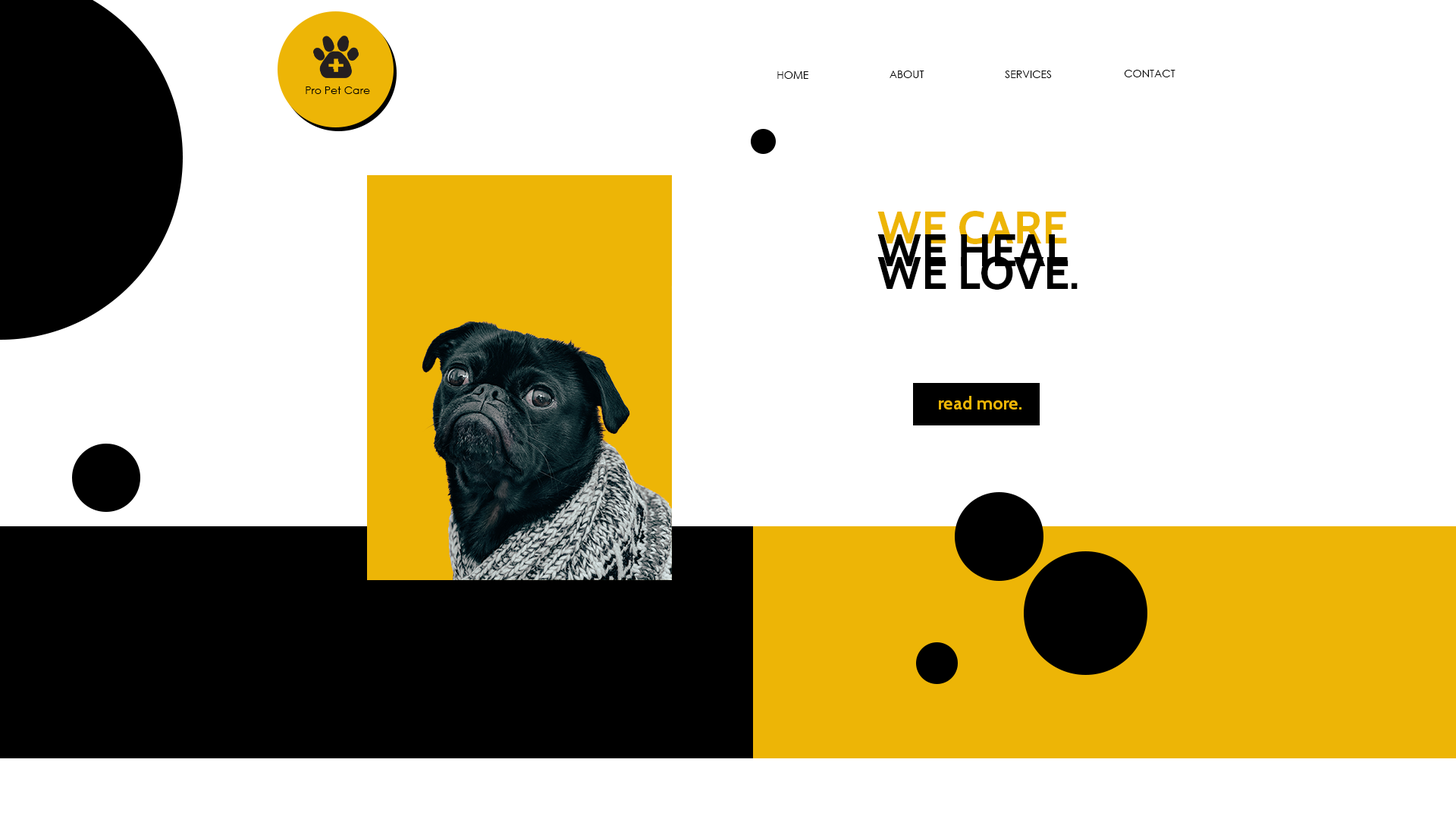
<style>
.page{position:relative;width:1456px;height:819px;background:#ffffff}
.page>*{position:absolute;margin:0}
.t1{font:10.6px "CenturyGothic";color:#000000}
.t2{font:45.5px/22.7px "Cabin-Bold";color:#000000}
.t3{font:45.5px/22.7px "Cabin-Bold";color:#edb506}
.t4{font:18.2px "Cabin-Bold";color:#edb506}
</style>
<div class="page">
<p class="t1" style="left:777px;top:71px;width:31px;height:8px">HOME</p>
<p class="t1" style="left:890px;top:71px;width:34px;height:7px">ABOUT</p>
<p class="t1" style="left:1005px;top:71px;width:47px;height:7px">SERVICES</p>
<p class="t1" style="left:1124px;top:70px;width:51px;height:7px">CONTACT</p>
<p class="t1" style="left:306px;top:86px;width:64px;height:8px">Pro Pet Care</p>
<p class="t2" style="left:877px;top:211px;width:201px;height:79px"><span class="t3">WE CARE<br></span>WE HEAL<br>WE LOVE.</p>
<p class="t4" style="left:939px;top:396px;width:82px;height:13px">read more.</p>
</div>
